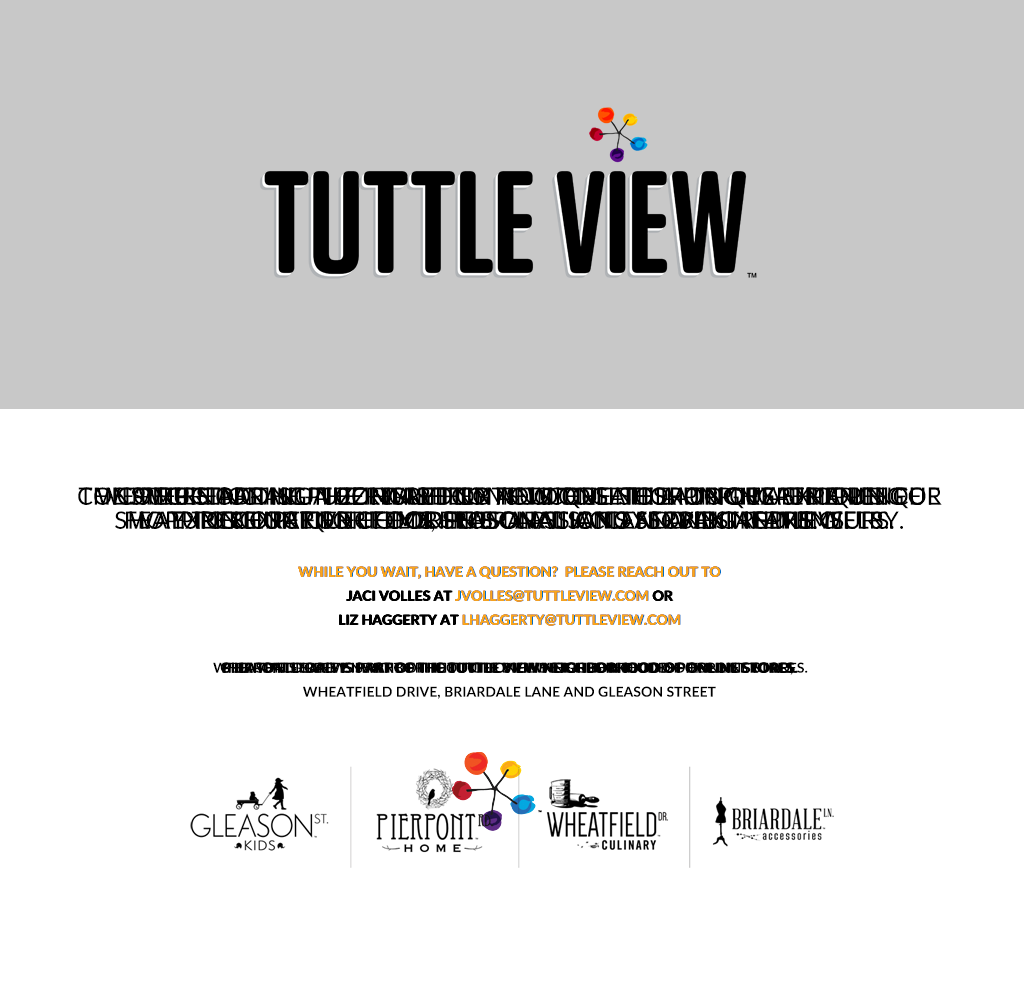
<style>
.page{position:relative;width:1024px;height:1000px;background:#ffffff}
.page>*{position:absolute;margin:0}
.t1{font:24px/24px "Lato-Regular";color:#000000;text-transform:uppercase}
.t2{font:14px/24px "Lato-Bold";color:#48226f;text-transform:uppercase}
.t3{font:14px/24px "Lato-Bold";color:#000000;text-transform:uppercase}
.t4{font:14px/24px "Lato-Bold";color:#951a1d;text-transform:uppercase}
.t5{font:14px/24px "Lato-Bold";color:#fba81b;text-transform:uppercase}
.t6{font:14px/24px "Lato-Bold";color:#006dc7;text-transform:uppercase}
</style>
<div class="page">
<p class="t1" style="left:78px;top:487px;width:862px;height:186px;text-align:center">The pieces of the puzzle are coming together to create a unique way to shop for children's classic toys and infant gifts.<br><br><span class="t2">While you wait, have a question?  Please reach out to<br></span><span class="t3">Jaci Volles at </span><span class="t2">jvolles@tuttleview.com</span><span class="t3"> or <br>Liz Haggerty at </span><span class="t2">lhaggerty@tuttleview.com<br></span><span class="t3"><br>GLEASON STREET is part of the Tuttle View neighborhood of online stores.</span></p>
<p class="t1" style="left:78px;top:487px;width:864px;height:186px;text-align:center">Construction is underway for a unique shopping experience for decorative home, seasonal  and serving items.<br><br><span class="t4">While you wait, have a question?  Please reach out to<br></span><span class="t3">Jaci Volles at </span><span class="t4">jvolles@tuttleview.com</span><span class="t3"> or <br>Liz Haggerty at </span><span class="t4">lhaggerty@tuttleview.com<br></span><span class="t3"><br>PIERPONT ROAD is part of the Tuttle View neighborhood of online stores.</span></p>
<p class="t3" style="left:96px;top:487px;width:826px;height:212px;text-align:center"><span class="t1">We're preparing a completely new online shopping experience featuring unique items from artisans and entrepreneurs.<br><br></span><span class="t5">While you wait, have a question?  Please reach out to<br></span>Jaci Volles at <span class="t5">jvolles@tuttleview.com</span> or <br>Liz Haggerty at <span class="t5">lhaggerty@tuttleview.com<br></span><br>The Tuttle View neighborhood of online stores includes Pierpont Road, <br>Wheatfield Drive, Briardale Lane and Gleason Street</p>
<p class="t1" style="left:115px;top:487px;width:788px;height:186px;text-align:center">We're adding the finishing touches  to launch a unique shopping experience for personal accessories and jewelry.<br><br><span class="t5">While you wait, have a question?  Please reach out to<br></span><span class="t3">Jaci Volles at </span><span class="t5">jvolles@tuttleview.com</span><span class="t3"> or <br>Liz Haggerty at </span><span class="t5">lhaggerty@tuttleview.com<br></span><span class="t3"><br>BRIARDALE LANE is part of the Tuttle View neighborhood of online stores.</span></p>
<p class="t1" style="left:118px;top:487px;width:785px;height:186px;text-align:center">Combining all the ingredients to create a unique shopping experience for food preparation and baking items.<br><br><span class="t6">While you wait, have a question?  Please reach out to<br></span><span class="t3">Jaci Volles at </span><span class="t6">jvolles@tuttleview.com</span><span class="t3"> or <br>Liz Haggerty at </span><span class="t6">lhaggerty@tuttleview.com<br></span><span class="t3"><br>Wheatfield Drive is part of the Tuttle View neighborhood of online stores.</span></p>
</div>
